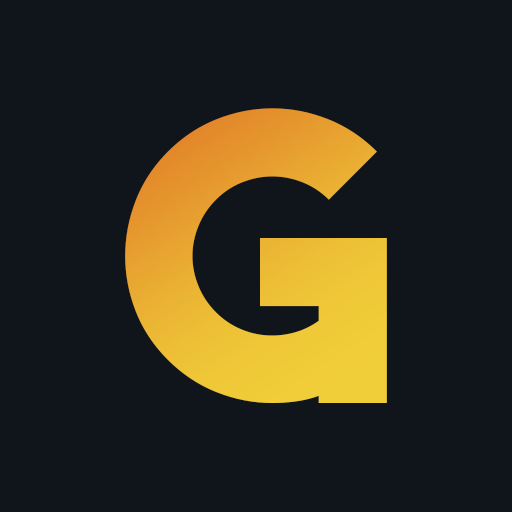
<style>
.page{position:relative;width:512px;height:512px;background:#10141b}
.page>*{position:absolute;margin:0}
.t1{font:400px "TheBoldFont-Bold"}
</style>
<div class="page">
<p class="t1" style="left:125px;top:108px;width:262px;height:295px">G</p>
</div>
